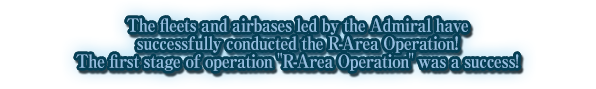
<style>
.page{position:relative;width:596px;height:89px;background:#ffffff}
.page>*{position:absolute;margin:0}
.t1{font:18px/18px "RyuminPro-ExBold";letter-spacing:-0.04em;color:#93bee0;scale:0.9 1}
</style>
<div class="page">
<p class="t1" style="left:76px;top:18px;width:443px;height:53px;text-align:center">The fleets and airbases led by the Admiral have<br>successfully conducted the R-Area Operation!<br>The first stage of operation "R-Area Operation" was a success!</p>
</div>
